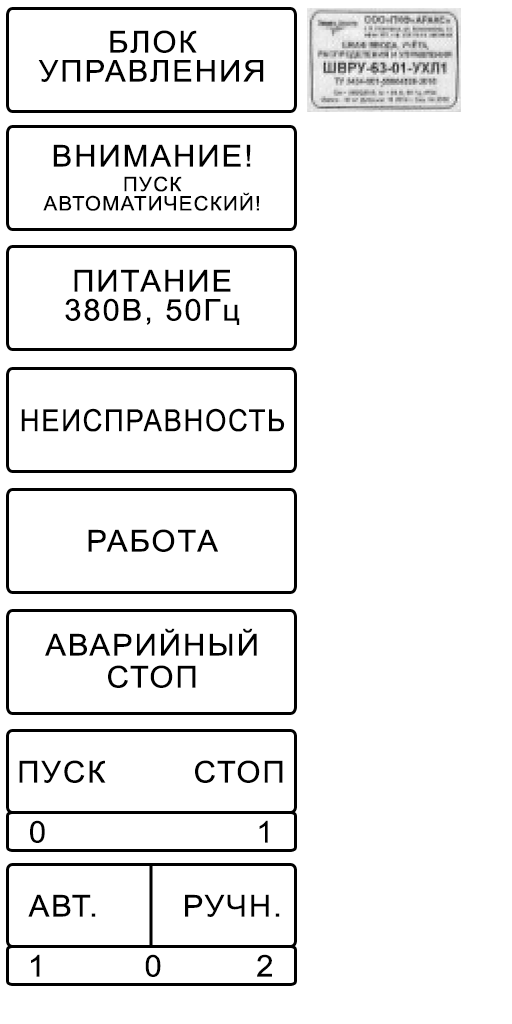
<style>
.page{position:relative;width:512px;height:1024px;background:#ffffff}
.page>*{position:absolute;margin:0}
.t1{font:51.6px/29px "ArialMT";letter-spacing:0.06em;color:#000000;scale:1.03 1}
.t2{font:51.6px "ArialMT";letter-spacing:0.06em;color:#000000;scale:1.03 1}
.t3{font:34.3px/19.3px "ArialMT";letter-spacing:0.06em;color:#000000}
.t4{font:52.2px "ArialMT";letter-spacing:0.06em;color:#000000;scale:0.9 1}
.t5{font:51.6px/32px "ArialMT";letter-spacing:0.06em;color:#000000;scale:1.03 1}
</style>
<div class="page">
<p class="t1" style="left:38px;top:30px;width:226px;height:52px;text-align:center">БЛОК<br>УПРАВЛЕНИЯ</p>
<p class="t2" style="left:53px;top:144px;width:198px;height:23px">ВНИМАНИЕ!</p>
<p class="t3" style="left:43px;top:176px;width:216px;height:35px;text-align:center">ПУСК<br>АВТОМАТИЧЕСКИЙ!</p>
<p class="t1" style="left:65px;top:269px;width:175px;height:56px;text-align:center">ПИТАНИЕ<br>380В, 50Гц</p>
<p class="t4" style="left:21px;top:408px;width:264px;height:24px">НЕИСПРАВНОСТЬ</p>
<p class="t2" style="left:88px;top:529px;width:130px;height:23px">РАБОТА</p>
<p class="t5" style="left:45px;top:628px;width:212px;height:60px;text-align:center">АВАРИЙНЫЙ<br>СТОП</p>
<p class="t2" style="left:19px;top:760px;width:87px;height:23px">ПУСК</p>
<p class="t2" style="left:195px;top:760px;width:88px;height:23px">СТОП</p>
<p class="t2" style="left:30px;top:820px;width:15px;height:23px">0</p>
<p class="t2" style="left:259px;top:820px;width:9px;height:23px">1</p>
<p class="t2" style="left:28px;top:894px;width:68px;height:23px">АВТ.</p>
<p class="t2" style="left:185px;top:894px;width:95px;height:23px">РУЧН.</p>
<p class="t2" style="left:31px;top:954px;width:9px;height:23px">1</p>
<p class="t2" style="left:145px;top:954px;width:16px;height:23px">0</p>
<p class="t2" style="left:257px;top:954px;width:15px;height:23px">2</p>
</div>
